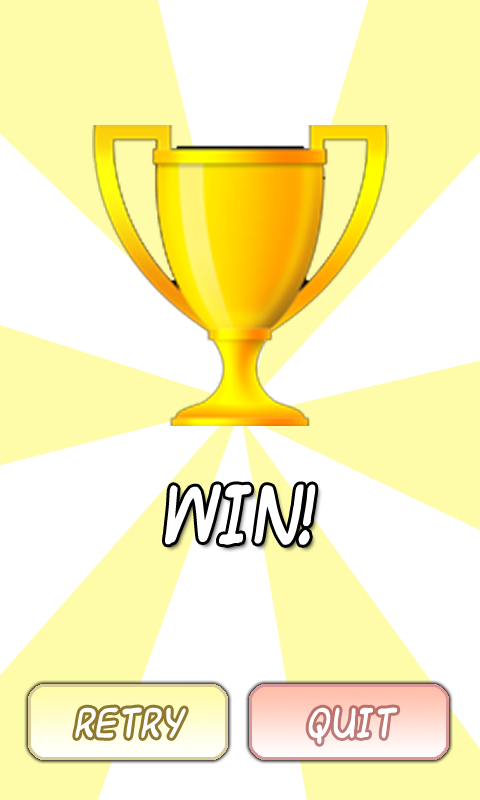
<style>
.page{position:relative;width:480px;height:800px;background:#ffffff}
.page>*{position:absolute;margin:0}
.t1{font:60px "Universalfruitcake";color:#ffffff}
.t2{font:30px "Universalfruitcake";color:#ffffff}
</style>
<div class="page">
<p class="t1" style="left:165px;top:484px;width:151px;height:61px">WIN!</p>
<p class="t2" style="left:75px;top:707px;width:111px;height:31px">retRY</p>
<p class="t2" style="left:75px;top:707px;width:111px;height:31px">retRY</p>
<p class="t2" style="left:308px;top:707px;width:90px;height:37px">QUIT</p>
<p class="t2" style="left:308px;top:707px;width:90px;height:37px">QUIT</p>
</div>
